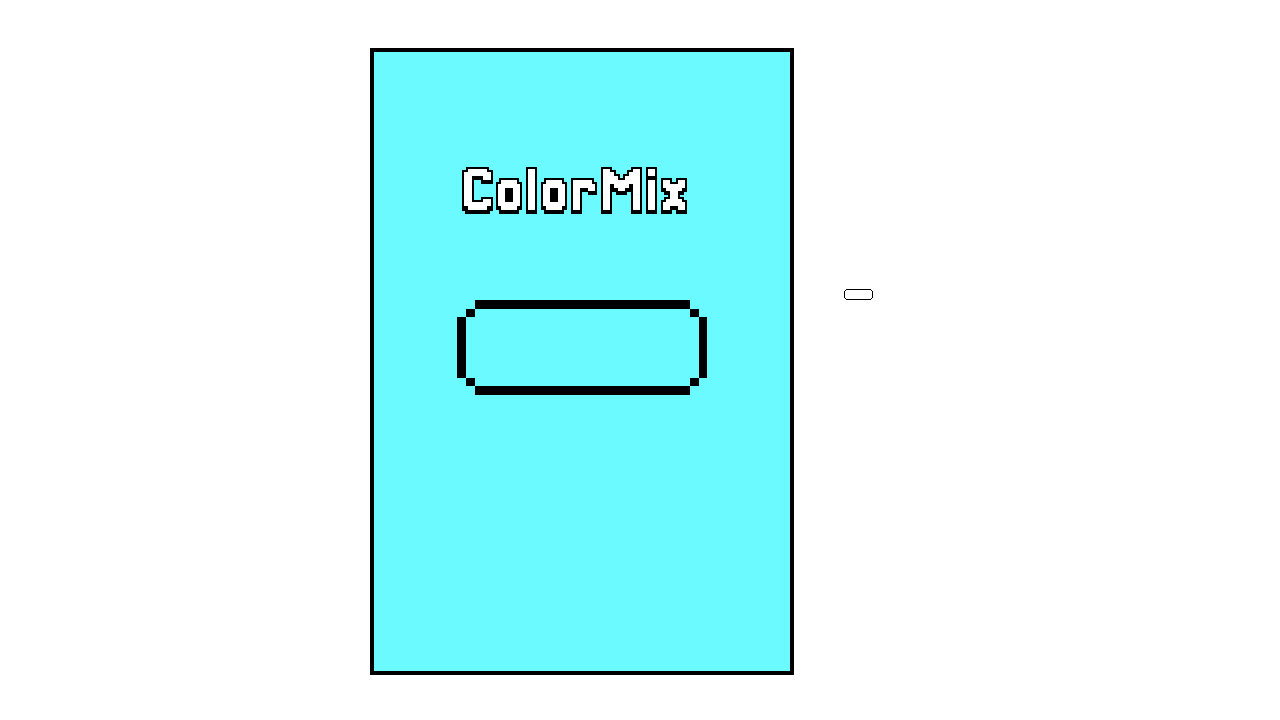
<style>
.page{position:relative;width:1280px;height:720px;background:#ffffff}
.page>*{position:absolute;margin:0}
.t1{font:60px "Pixellari";color:#ffffff}
</style>
<div class="page">
<p class="t1" style="left:464px;top:169px;width:221px;height:41px">ColorMix</p>
</div>
